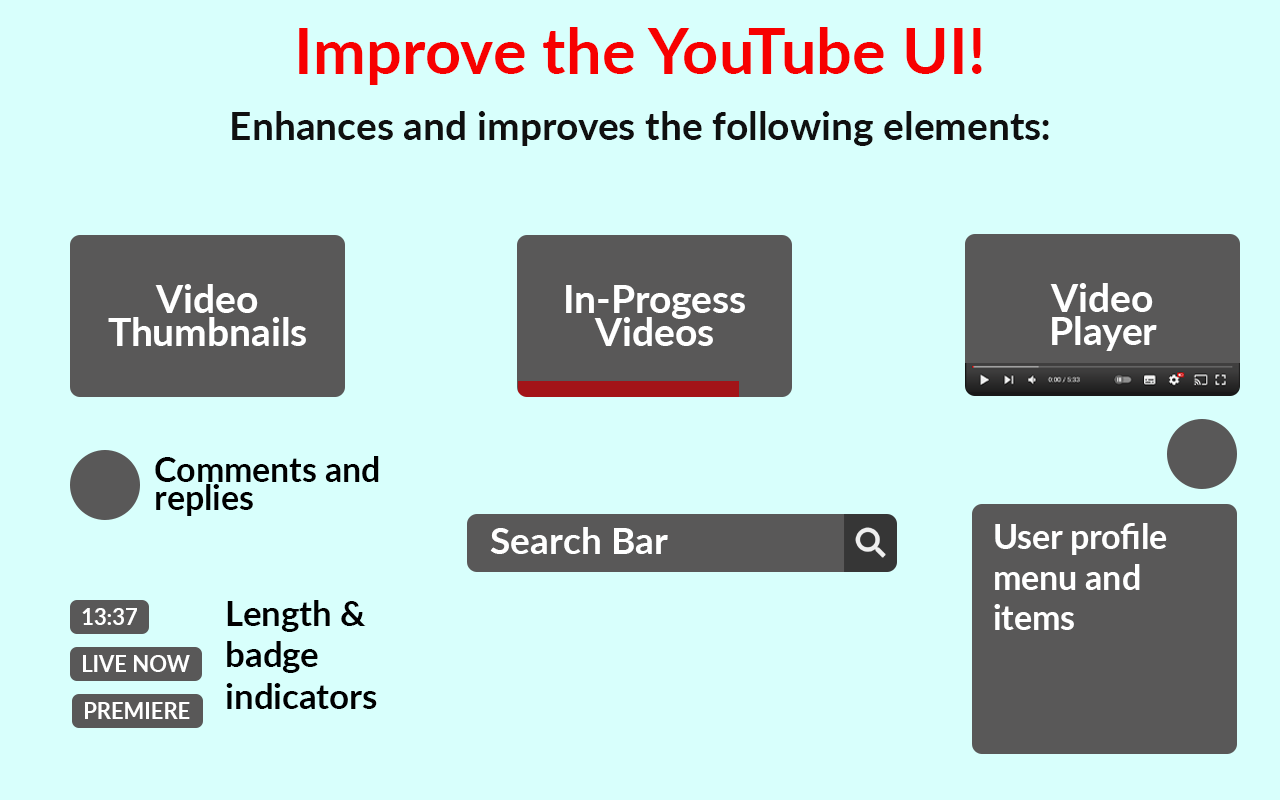
<style>
.page{position:relative;width:1280px;height:800px;background:#d8fffc}
.page>*{position:absolute;margin:0}
.t1{font:63.5px "Lato-Bold";color:#f70000}
.t2{font:39.1px "Lato-Bold";color:#101010}
.t3{font:38.9px/32.9px "Lato-Bold";color:#ffffff}
.t4{font:33.7px/28.5px "Lato-Bold";color:#000000}
.t5{font:37.3px "Lato-Bold";color:#ffffff}
.t6{font:33.8px "Lato-Bold";color:#ffffff}
.t7{font:34.6px "Lato-Bold";color:#000000}
.t8{font:22px "Lato-Bold";color:#ffffff}
</style>
<div class="page">
<p class="t1" style="left:299px;top:27px;width:683px;height:58px">Improve the YouTube UI!</p>
<p class="t2" style="left:232px;top:111px;width:817px;height:35px">Enhances and improves the following elements:</p>
<p class="t3" style="left:108px;top:284px;width:198px;height:62px;text-align:center">Video<br>Thumbnails</p>
<p class="t3" style="left:566px;top:285px;width:179px;height:61px;text-align:center">In-Progess<br>Videos</p>
<p class="t3" style="left:1050px;top:283px;width:107px;height:68px;text-align:center">Video<br>Player</p>
<p class="t4" style="left:155px;top:456px;width:224px;height:60px">Comments and<br>replies</p>
<p class="t5" style="left:490px;top:527px;width:178px;height:27px">Search Bar</p>
<p class="t6" style="left:994px;top:523px;width:173px;height:107px">User profile<br>menu and<br>items</p>
<p class="t7" style="left:226px;top:600px;width:151px;height:109px">Length &amp;<br>badge<br>indicators</p>
<p class="t8" style="left:82px;top:608px;width:55px;height:17px">13:37</p>
<p class="t8" style="left:83px;top:655px;width:107px;height:17px">LIVE NOW</p>
<p class="t8" style="left:85px;top:702px;width:105px;height:17px">PREMIERE</p>
</div>
